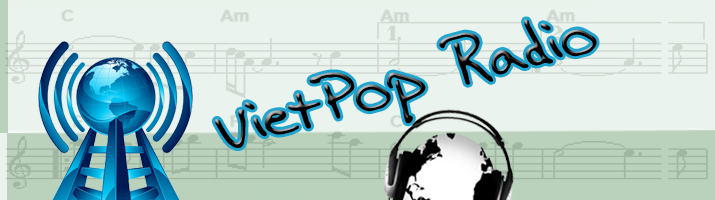
<style>
.page{position:relative;width:715px;height:200px;background:#eaf3ed}
.page>*{position:absolute;margin:0}
.t1{font:64.2px "AEnigmaScrawl4BRK";scale:1.06 1}
</style>
<div class="page">
<p class="t1" style="left:214px;top:19px;width:383px;height:129px;rotate:-15deg">VietPop Radio</p>
</div>
